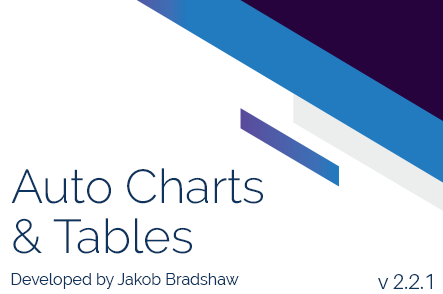
<style>
.page{position:relative;width:443px;height:294px;background:#ffffff}
.page>*{position:absolute;margin:0}
.t1{font:47.6px/50.7px "Raleway-Light";color:#0d345e}
.t2{font:16px "Raleway-Regular";color:#0d345e}
.t3{font:20.8px "Aileron-Light";color:#0d345e}
</style>
<div class="page">
<p class="t1" style="left:11px;top:168px;width:252px;height:86px">Auto Charts<br>&amp; Tables</p>
<p class="t2" style="left:11px;top:273px;width:228px;height:16px">Developed by Jakob Bradshaw</p>
<p class="t3" style="left:378px;top:274px;width:54px;height:15px">v 2.2.1</p>
</div>
